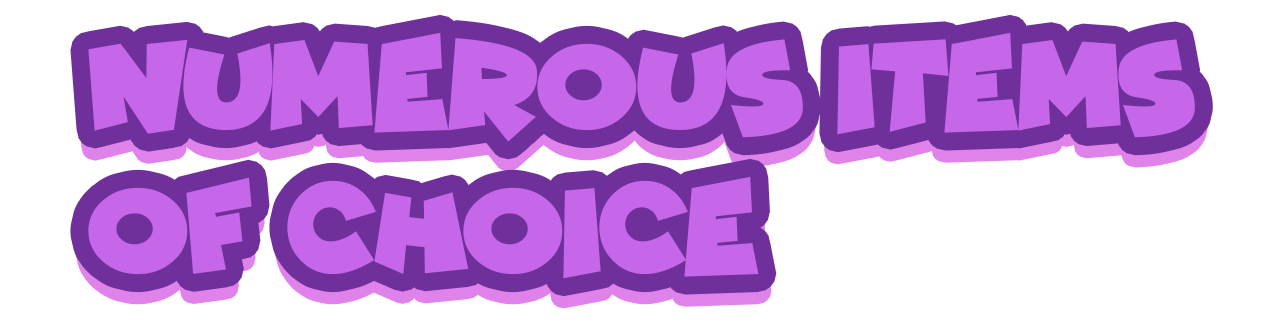
<style>
.page{position:relative;width:1265px;height:320px;background:#ffffff}
.page>*{position:absolute;margin:0}
.t1{font:120px "ComicKings";letter-spacing:-0.01em;color:#c667e9}
</style>
<div class="page">
<p class="t1" style="left:88px;top:32px;width:1107px;height:247px">Numerous items <br>of choice</p>
</div>
